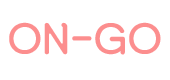
<style>
.page{position:relative;width:170px;height:80px;background:#ffffff}
.page>*{position:absolute;margin:0}
.t1{font:54.7px "YanoljaYacheR";color:#fc8e8e}
</style>
<div class="page">
<p class="t1" style="left:9px;top:22px;width:152px;height:33px">ON-GO</p>
</div>
